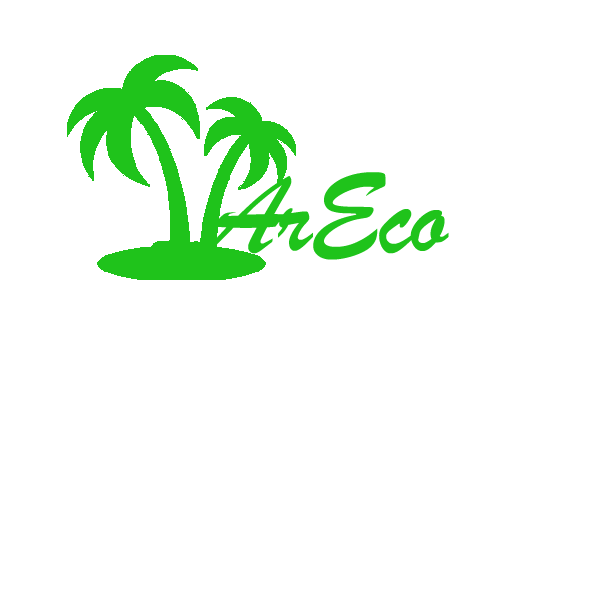
<style>
.page{position:relative;width:600px;height:600px;background:#ffffff}
.page>*{position:absolute;margin:0}
.t1{font:116.7px "BrushScriptMT";letter-spacing:-0.02em;color:#1fc31b}
</style>
<div class="page">
<p class="t1" style="left:198px;top:172px;width:251px;height:88px">ArEco</p>
</div>
